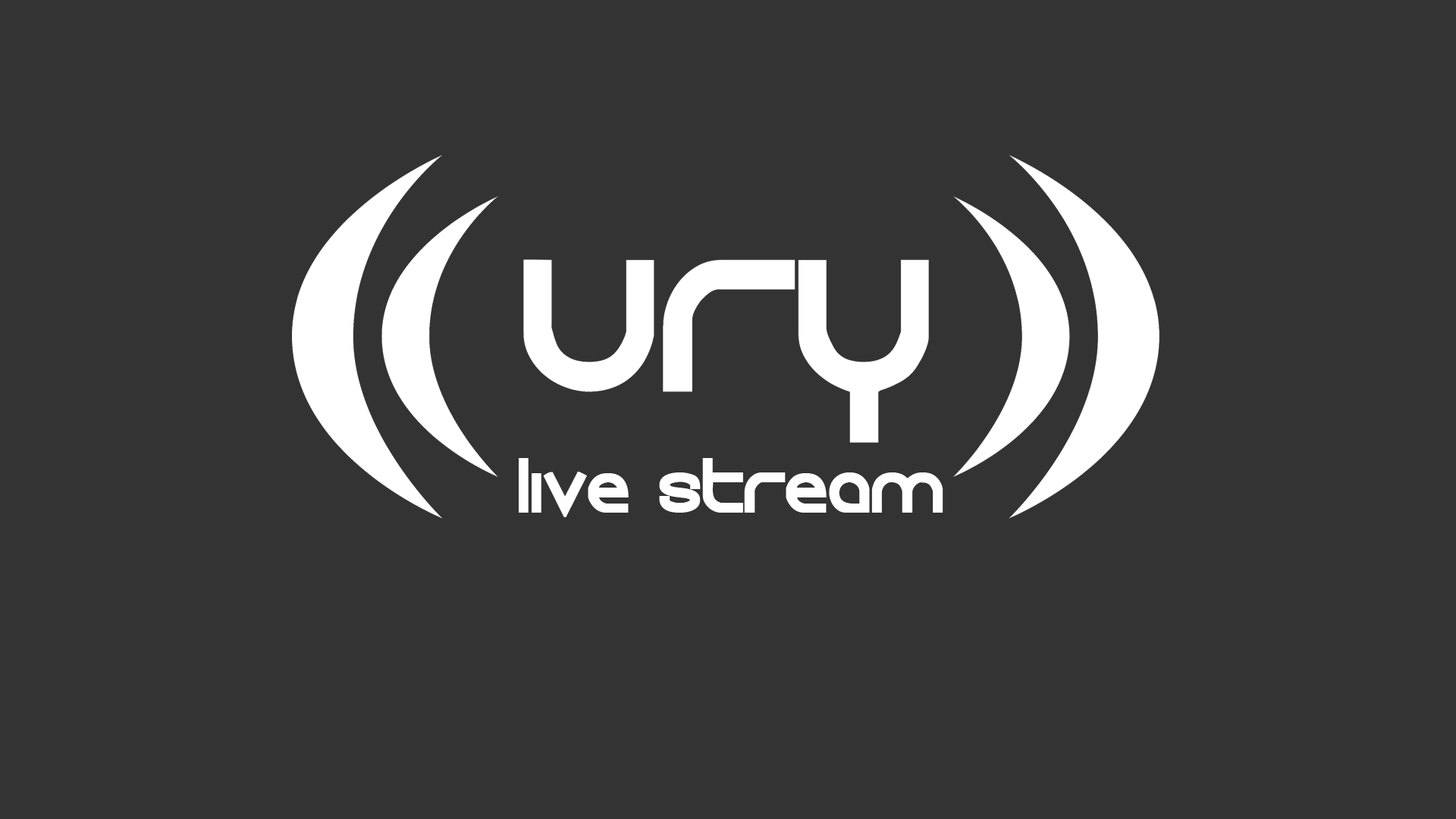
<style>
.page{position:relative;width:1456px;height:819px;background:#333333}
.page>*{position:absolute;margin:0}
.t1{font:54.6px "roundabout";color:#ffffff;font-weight:bold}
</style>
<div class="page">
<p class="t1" style="left:519px;top:458px;width:424px;height:59px">Live Stream</p>
</div>
